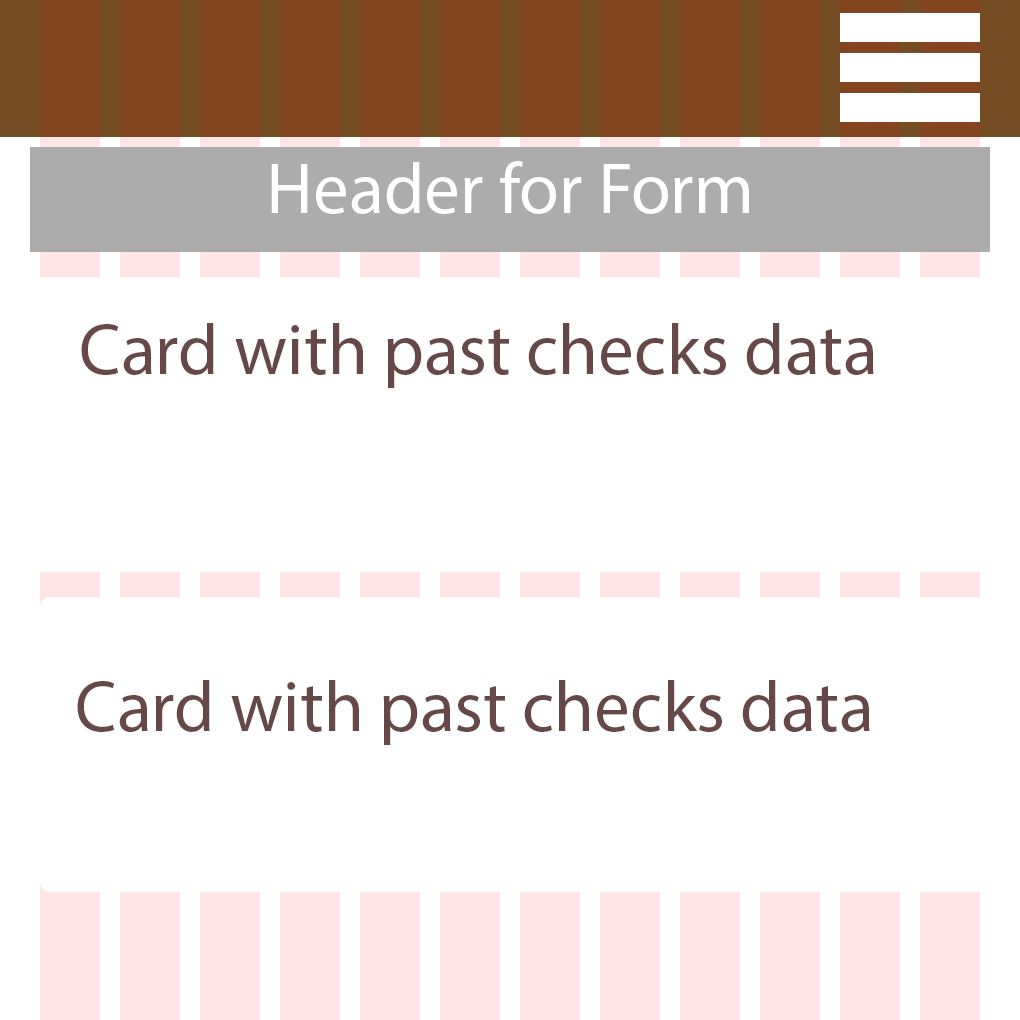
<style>
.page{position:relative;width:1020px;height:1020px;background:#ffffff}
.page>*{position:absolute;margin:0}
.t1{font:72px "MyriadPro-Regular";color:#ffffff}
.t2{font:72px "MyriadPro-Regular";color:#664848}
</style>
<div class="page">
<p class="t1" style="left:271px;top:161px;width:478px;height:53px">Header for Form</p>
<p class="t2" style="left:81px;top:323px;width:793px;height:65px">Card with past checks data</p>
<p class="t2" style="left:77px;top:680px;width:793px;height:65px">Card with past checks data</p>
</div>
